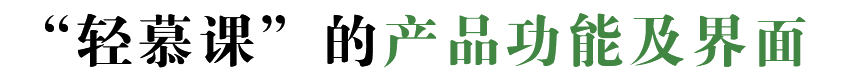
<style>
.page{position:relative;width:850px;height:81px;background:#ffffff}
.page>*{position:absolute;margin:0}
.t1{font:58px "FZDBSK--GBK1-0";letter-spacing:0.06em;color:#418643}
.t2{font:58px "FZDBSK--GBK1-0";letter-spacing:0.06em;color:#000000}
</style>
<div class="page">
<p class="t1" style="left:45px;top:13px;width:761px;height:55px"><span class="t2">“轻慕课”的</span>产品功能及界面</p>
</div>
